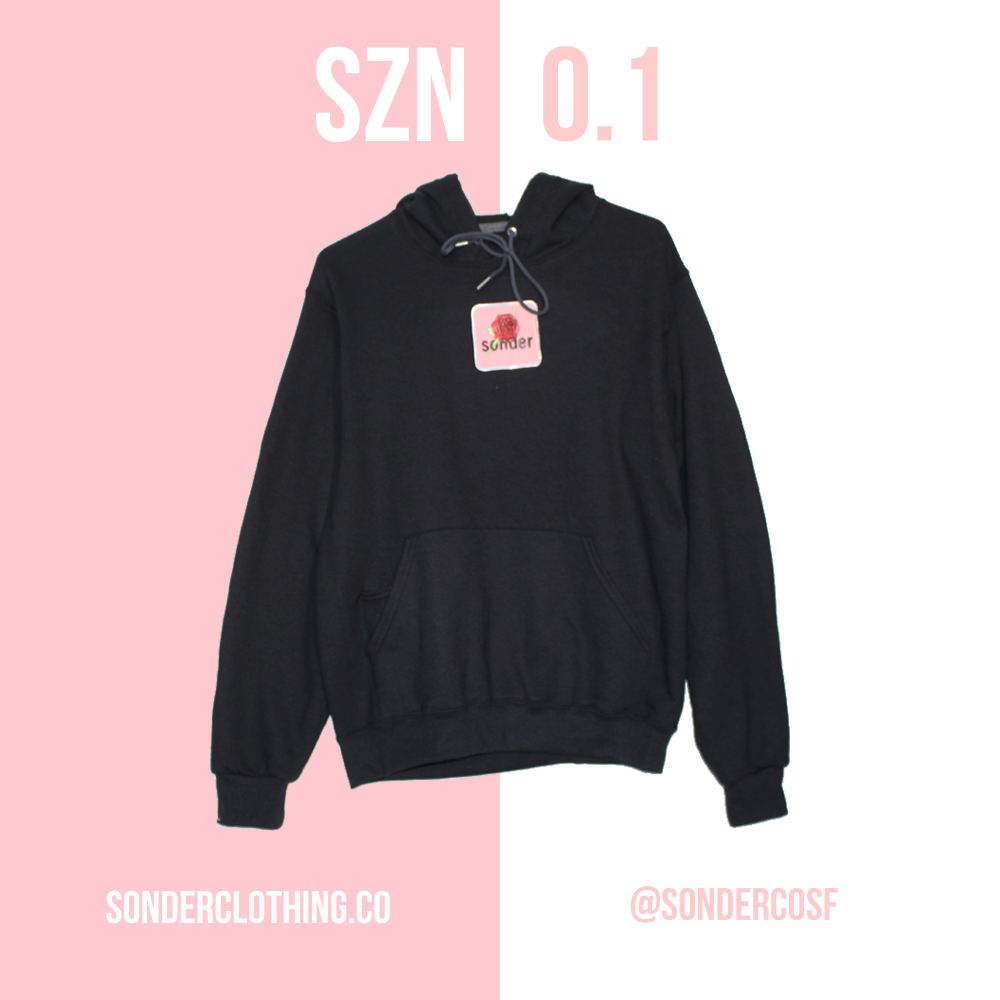
<style>
.page{position:relative;width:1000px;height:1000px;background:#ffffff}
.page>*{position:absolute;margin:0}
.t1{font:133.3px "BebasNeue";color:#ffffff}
.t2{font:133.3px "BebasNeue";color:#ffcccc}
.t3{font:45.8px "BebasNeue";color:#ffffff}
.t4{font:45.8px "BebasNeue";color:#ffcccc}
</style>
<div class="page">
<p class="t1" style="left:316px;top:46px;width:148px;height:96px">szn</p>
<p class="t2" style="left:543px;top:46px;width:115px;height:96px">0.1</p>
<p class="t3" style="left:106px;top:890px;width:284px;height:34px">sonderclothing.co</p>
<p class="t4" style="left:630px;top:886px;width:208px;height:37px">@sondercosf</p>
</div>
